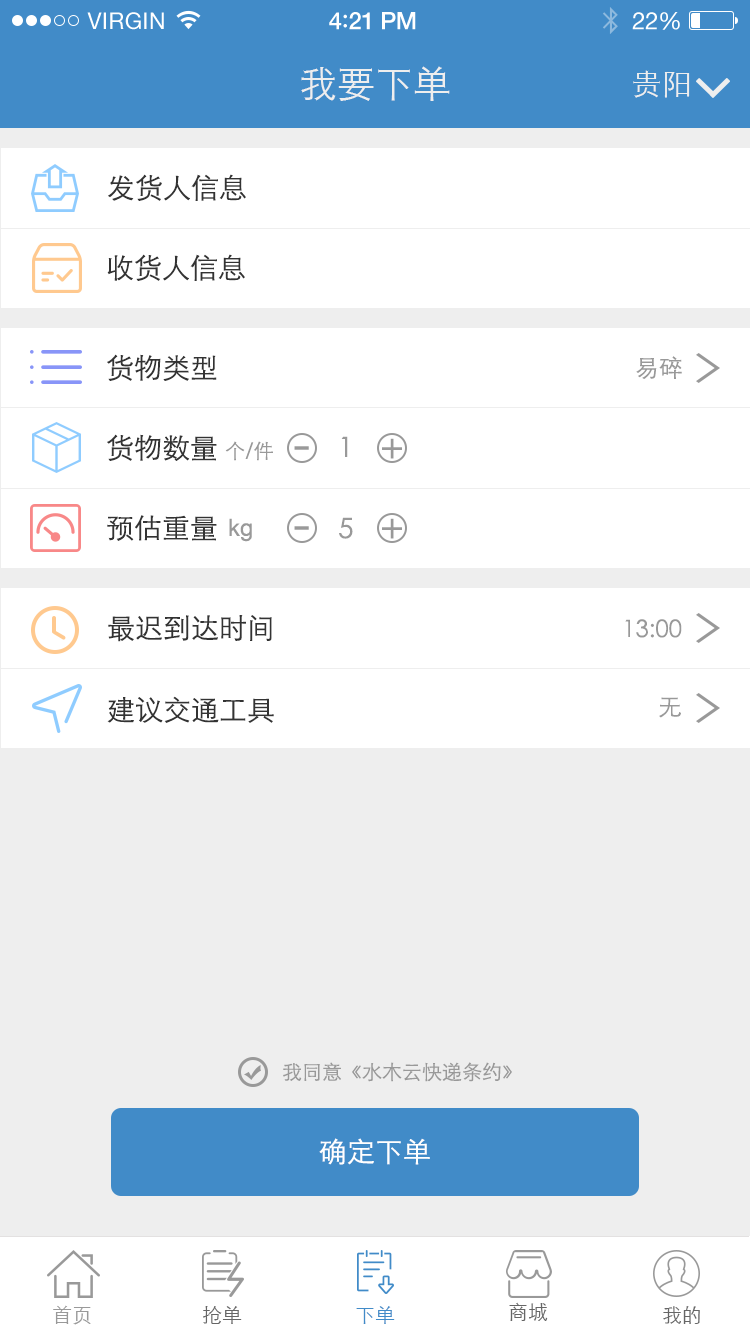
<style>
.page{position:relative;width:750px;height:1334px;background:#ffffff}
.page>*{position:absolute;margin:0}
.t1{font:23px "HelveticaNeue";letter-spacing:0.02em;color:#ffffff}
.t2{font:24px "HelveticaNeue-Medium";letter-spacing:-0.02em;color:#ffffff}
.t3{font:26px "Avenir-Medium";letter-spacing:-0.02em;color:#ffffff}
.t4{font:24px "HelveticaNeue";letter-spacing:-0.02em;color:#ffffff}
.t5{font:38px "STXihei";color:#eeeeee}
.t6{font:30px "STXihei";color:#eeeeee}
.t7{font:28px "STXihei";color:#333333}
.t8{font:24px "STXihei";color:#999999}
.t9{font:28px "STXihei";color:#999999}
.t10{font:40px "STXihei";color:#999999}
.t11{font:20px "STXihei";color:#999999}
.t12{font:52px "STXihei";color:#999999}
.t13{font:24px "ArialMT";color:#999999}
.t14{font:28px "STXihei";color:#ffffff}
.t15{font:20px "STXihei";color:#666666}
.t16{font:20px "STXihei";color:#418bc8}
</style>
<div class="page">
<p class="t1" style="left:87px;top:12px;width:77px;height:18px">VIRGIN</p>
<p class="t2" style="left:329px;top:12px;width:87px;height:18px">4<span class="t3">:</span>21 PM</p>
<p class="t4" style="left:632px;top:12px;width:48px;height:18px">22%</p>
<p class="t5" style="left:301px;top:66px;width:149px;height:35px">我要下单</p>
<p class="t6" style="left:633px;top:70px;width:57px;height:28px">贵阳</p>
<p class="t7" style="left:108px;top:174px;width:138px;height:27px">发货人信息</p>
<p class="t7" style="left:107px;top:254px;width:138px;height:27px">收货人信息</p>
<p class="t7" style="left:107px;top:354px;width:110px;height:27px">货物类型</p>
<p class="t8" style="left:636px;top:356px;width:46px;height:23px">易碎</p>
<p class="t7" style="left:107px;top:434px;width:110px;height:27px">货物数量</p>
<p class="t9" style="left:341px;top:436px;width:7px;height:21px">1</p>
<p class="t10" style="left:382px;top:438px;width:20px;height:21px">+</p>
<p class="t11" style="left:225px;top:441px;width:48px;height:20px">个/件</p>
<p class="t12" style="left:294px;top:446px;width:15px;height:4px">-</p>
<p class="t7" style="left:107px;top:515px;width:110px;height:26px">预估重量</p>
<p class="t13" style="left:229px;top:518px;width:23px;height:24px">kg</p>
<p class="t9" style="left:339px;top:517px;width:14px;height:22px">5</p>
<p class="t10" style="left:382px;top:518px;width:20px;height:21px">+</p>
<p class="t12" style="left:294px;top:526px;width:15px;height:4px">-</p>
<p class="t7" style="left:108px;top:615px;width:164px;height:27px">最迟到达时间</p>
<p class="t8" style="left:625px;top:619px;width:57px;height:19px">13:00</p>
<p class="t7" style="left:107px;top:696px;width:167px;height:27px">建议交通工具</p>
<p class="t8" style="left:659px;top:697px;width:22px;height:21px">无</p>
<p class="t11" style="left:283px;top:1062px;width:229px;height:20px">我同意《水木云快递条约》</p>
<p class="t14" style="left:319px;top:1138px;width:111px;height:27px">确定下单</p>
<p class="t15" style="left:509px;top:1302px;width:39px;height:19px">商城</p>
<p class="t11" style="left:53px;top:1305px;width:38px;height:20px">首页</p>
<p class="t15" style="left:203px;top:1306px;width:39px;height:18px">抢单</p>
<p class="t16" style="left:356px;top:1306px;width:39px;height:18px">下单</p>
<p class="t15" style="left:663px;top:1306px;width:37px;height:18px">我的</p>
</div>
